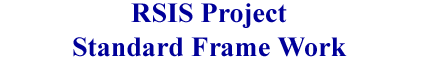
<style>
.page{position:relative;width:425px;height:63px;background:#ffffff}
.page>*{position:absolute;margin:0}
.t1{font:28px "TimesNewRomanPS-BoldMT";color:#000099}
</style>
<div class="page">
<p class="t1" style="left:73px;top:3px;width:274px;height:54px;text-align:center">RSIS Project<br>Standard Frame Work</p>
</div>
